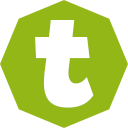
<style>
.page{position:relative;width:128px;height:128px;background:#94b718}
.page>*{position:absolute;margin:0}
.t1{font:130.9px "RifficFree-Bold";color:#ffffff}
</style>
<div class="page">
<p class="t1" style="left:35px;top:20px;width:59px;height:88px">t</p>
</div>
